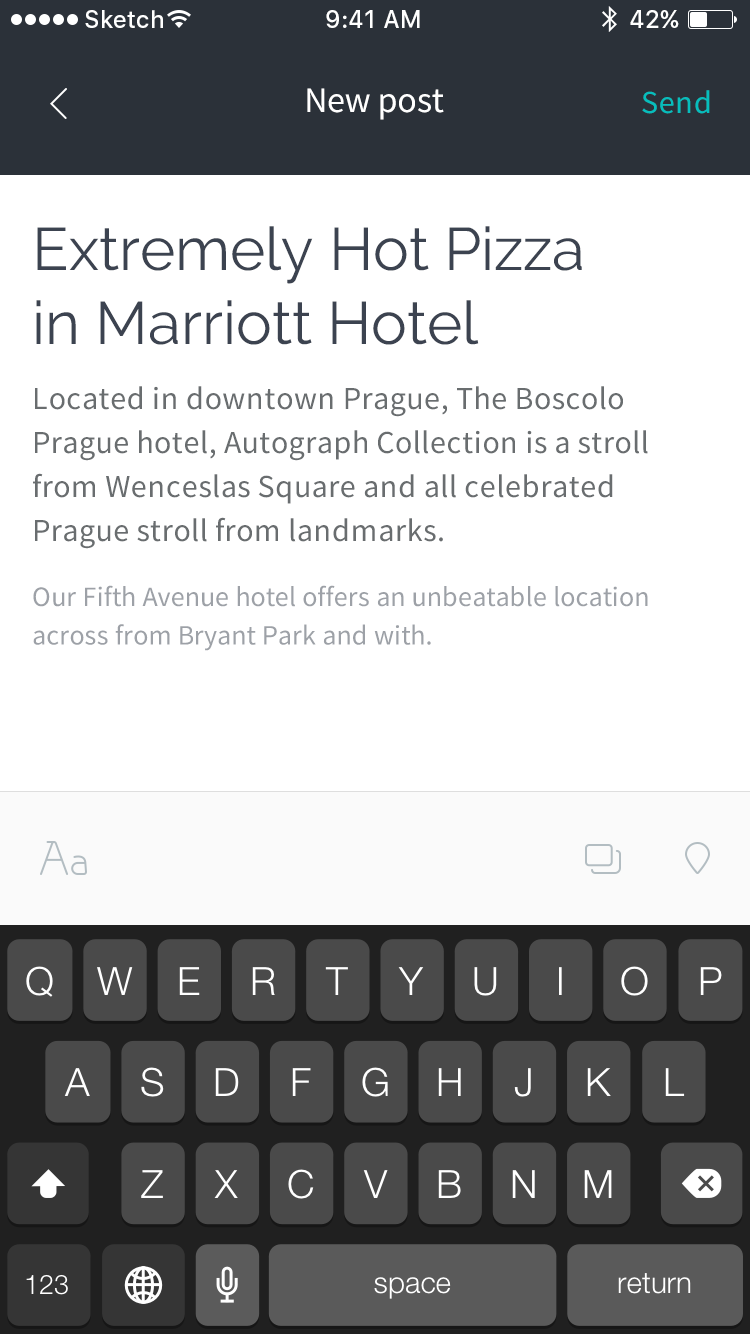
<style>
.page{position:relative;width:750px;height:1334px;background:#ffffff}
.page>*{position:absolute;margin:0}
.t1{font:24px "SFUIText-Medium";color:#ffffff}
.t2{font:36px "SourceSansPro-Regular";letter-spacing:-0.005em;color:#ffffff}
.t3{font:32px "SourceSansPro-Regular";letter-spacing:0.02em;color:#06bebd}
.t4{font:60px/74px "Raleway";color:#3c4350}
.t5{font:32px/44px "SourceSansPro-Regular";letter-spacing:0.02em;color:#696d6f}
.t6{font:28px/38.5px "SourceSansPro-Regular";letter-spacing:0.005em;color:#9da1a7}
</style>
<div class="page">
<p class="t1" style="left:85px;top:10px;width:78px;height:18px">Sketch</p>
<p class="t1" style="left:326px;top:10px;width:94px;height:18px">9:41 AM</p>
<p class="t1" style="left:630px;top:10px;width:49px;height:18px">42%</p>
<p class="t2" style="left:307px;top:88px;width:137px;height:32px">New post</p>
<p class="t3" style="left:642px;top:90px;width:68px;height:24px">Send</p>
<p class="t4" style="left:36px;top:226px;width:546px;height:119px">Extremely Hot Pizza<br>in Marriott Hotel</p>
<p class="t5" style="left:33px;top:386px;width:615px;height:163px">Located in downtown Prague, The Boscolo<br>Prague hotel, Autograph Collection is a stroll<br>from Wenceslas Square and all celebrated<br>Prague stroll from landmarks.</p>
<p class="t6" style="left:33px;top:585px;width:615px;height:66px">Our Fifth Avenue hotel offers an unbeatable location<br>across from Bryant Park and with.</p>
</div>
